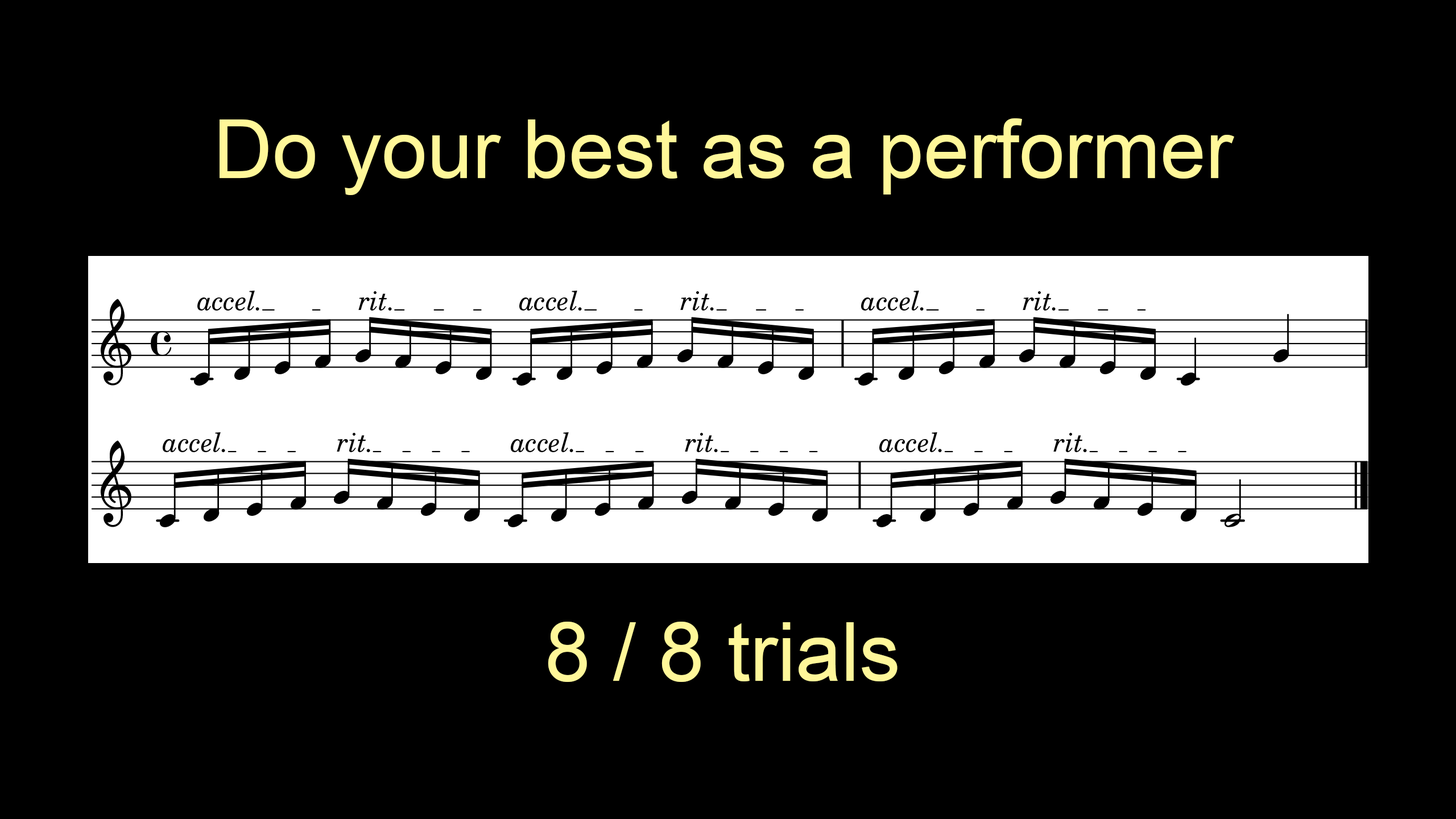
<style>
.page{position:relative;width:1456px;height:819px;background:#000000}
.page>*{position:absolute;margin:0}
.t1{font:81.9px "ArialMT";color:#fff799}
</style>
<div class="page">
<p class="t1" style="left:220px;top:118px;width:1014px;height:77px">Do your best as a performer</p>
<p class="t1" style="left:548px;top:622px;width:349px;height:60px">8 / 8 trials</p>
</div>
